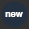
<style>
.page{position:relative;width:29px;height:29px;background:#243141}
.page>*{position:absolute;margin:0}
.t1{font:9px "Helvetica-Bold";color:#ffffff}
</style>
<div class="page">
<p class="t1" style="left:5px;top:12px;width:18px;height:5px">new</p>
</div>
